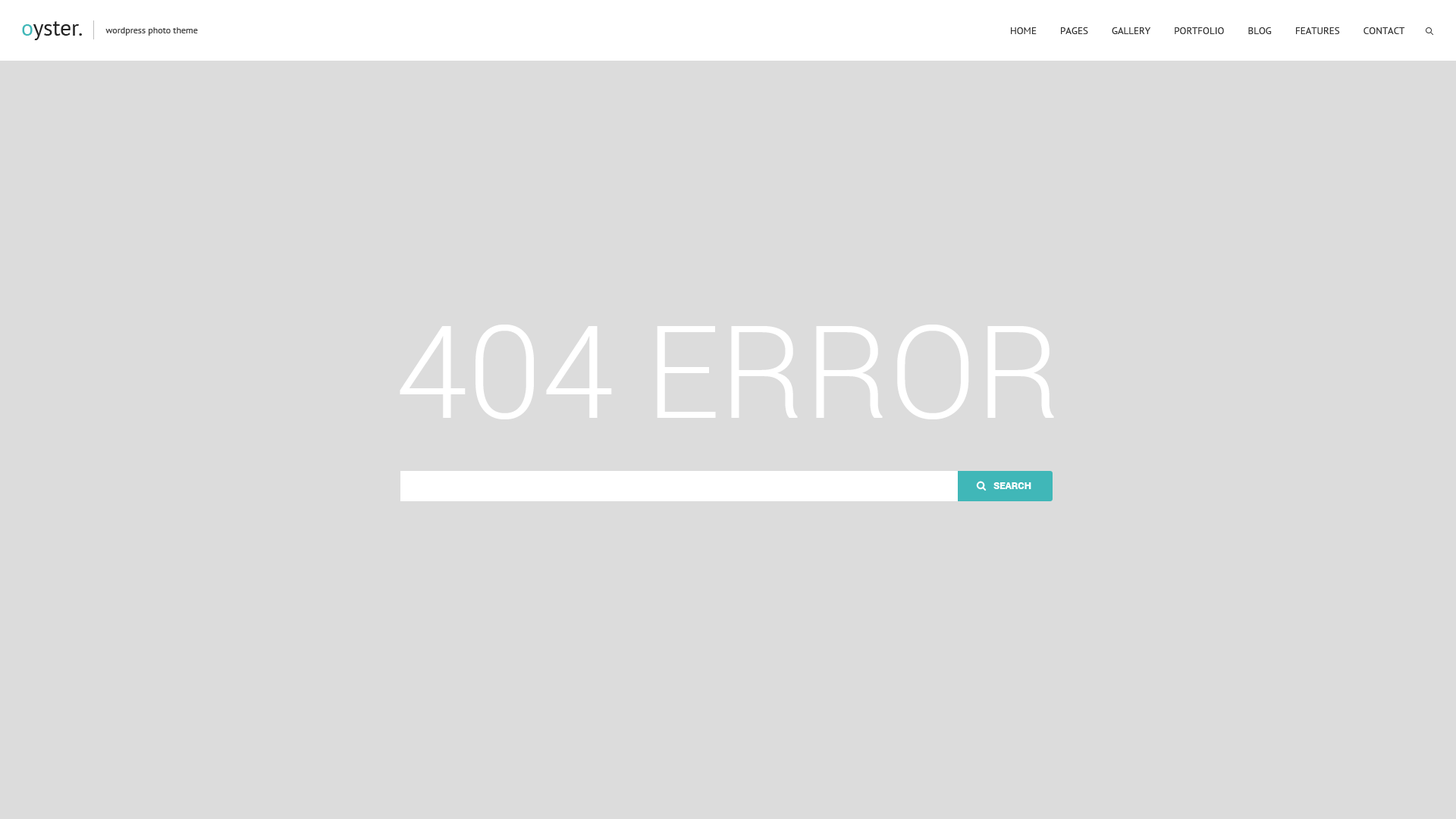
<style>
.page{position:relative;width:1456px;height:819px;background:#dcdcdc}
.page>*{position:absolute;margin:0}
.t1{font:9.1px "PTSans-Regular";color:#434343}
.t2{font:9.9px "PTSans-Regular";color:#343434;text-transform:uppercase}
.t3{font:128.9px "Roboto-Light";color:#ffffff;text-transform:uppercase}
</style>
<div class="page">
<p class="t1" style="left:105px;top:27px;width:93px;height:9px">wordpress photo theme</p>
<p class="t2" style="left:1011px;top:27px;width:394px;height:7px">Home         Pages         Gallery         Portfolio         Blog         Features         Contact</p>
<p class="t3" style="left:400px;top:325px;width:654px;height:94px">404 Error</p>
</div>
